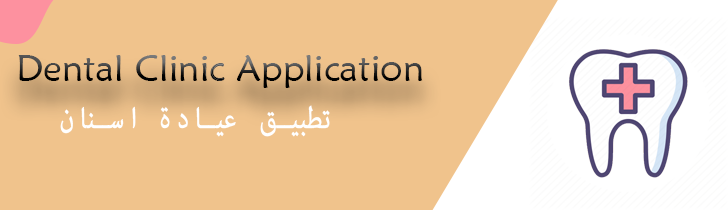
<style>
.page{position:relative;width:728px;height:210px;background:#f0c38c}
.page>*{position:absolute;margin:0}
.t1{font:37.5px "MaiandraGD-Regular"}
.t2{font:41.7px "AdobeArabic-Regular";letter-spacing:0.18em;color:#ffffff;font-weight:bold;scale:0.82 1}
</style>
<div class="page">
<p class="t1" style="left:18px;top:55px;width:405px;height:33px">Dental Clinic Application</p>
<p class="t2" style="left:60px;top:105px;width:270px;height:32px">تطبيق عيادة اسنان</p>
</div>
